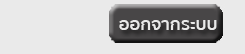
<style>
.page{position:relative;width:245px;height:54px;background:#eaeaea}
.page>*{position:absolute;margin:0}
.t1{font:18px "SukhumvitSet-SemiBold";color:#eaeaea;text-transform:uppercase}
</style>
<div class="page">
<p class="t1" style="left:119px;top:20px;width:98px;height:10px">ออกจากระบบ</p>
</div>
